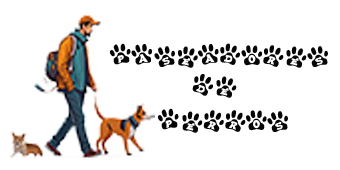
<style>
.page{position:relative;width:340px;height:170px;background:#ffffff}
.page>*{position:absolute;margin:0}
.t1{font:30px "EnnobledPet";color:#060606}
</style>
<div class="page">
<p class="t1" style="left:109px;top:43px;width:219px;height:25px">Paseadores</p>
<p class="t1" style="left:192px;top:74px;width:45px;height:24px">De</p>
<p class="t1" style="left:157px;top:108px;width:131px;height:25px">Perros</p>
</div>
